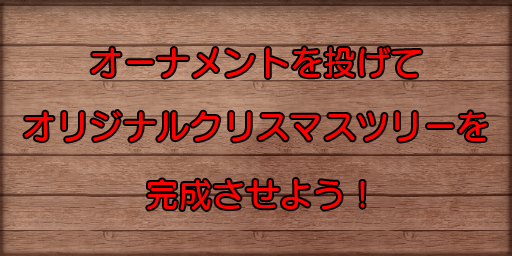
<style>
.page{position:relative;width:512px;height:256px}
.page>*{position:absolute;margin:0}
.t1{font:33.3px "SeuratProN-DB";color:#ff0000}
</style>
<div class="page">
<p class="t1" style="left:91px;top:47px;width:331px;height:31px">オーナメントを投げて</p>
<p class="t1" style="left:24px;top:111px;width:463px;height:31px">オリジナルクリスマスツリーを</p>
<p class="t1" style="left:147px;top:179px;width:218px;height:31px">完成させよう！</p>
</div>
